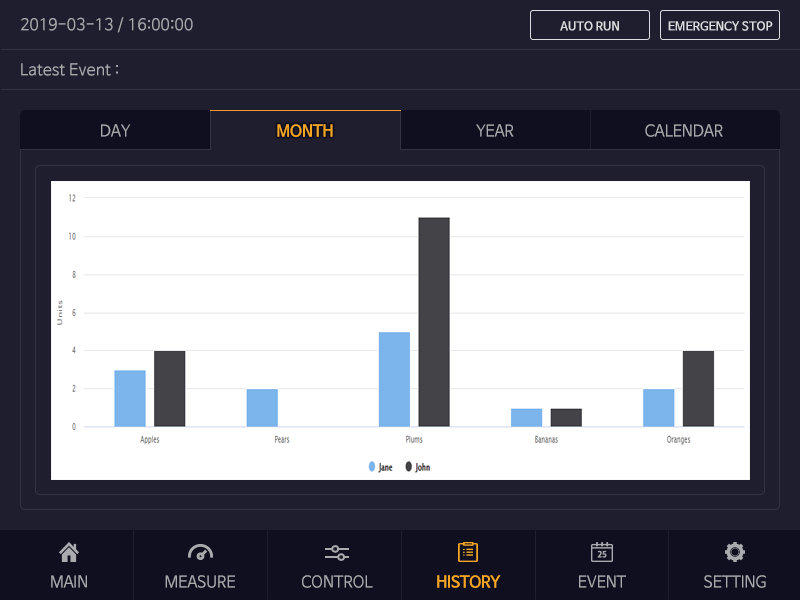
<style>
.page{position:relative;width:800px;height:600px;background:#1e1e2f}
.page>*{position:absolute;margin:0}
.t1{font:16px "NanumBarunGothic";color:#aaaaaf}
.t2{font:12px "NanumBarunGothicBold";color:#dcdce1}
.t3{font:16px "NanumBarunGothic";letter-spacing:-0.025em;color:#aaaaaf}
.t4{font:16px "NanumBarunGothicBold";letter-spacing:-0.025em;color:#f5a623}
</style>
<div class="page">
<p class="t1" style="left:21px;top:17px;width:172px;height:16px">2019-03-13 / 16:00:00</p>
<p class="t2" style="left:560px;top:21px;width:59px;height:10px">AUTO RUN</p>
<p class="t2" style="left:668px;top:21px;width:105px;height:10px">EMERGENCY STOP</p>
<p class="t1" style="left:21px;top:63px;width:97px;height:13px">Latest Event :</p>
<p class="t3" style="left:101px;top:124px;width:30px;height:13px">DAY</p>
<p class="t4" style="left:277px;top:124px;width:56px;height:13px">MONTH</p>
<p class="t3" style="left:476px;top:124px;width:38px;height:13px">YEAR</p>
<p class="t3" style="left:645px;top:124px;width:78px;height:13px">CALENDAR</p>
<p class="t3" style="left:51px;top:575px;width:36px;height:13px">MAIN</p>
<p class="t3" style="left:165px;top:575px;width:70px;height:13px">MEASURE</p>
<p class="t3" style="left:302px;top:575px;width:71px;height:13px">CONTROL</p>
<p class="t4" style="left:437px;top:575px;width:64px;height:13px">HISTORY</p>
<p class="t3" style="left:579px;top:575px;width:47px;height:13px">EVENT</p>
<p class="t3" style="left:704px;top:575px;width:62px;height:13px">SETTING</p>
</div>
